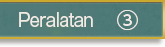
<style>
.page{position:relative;width:165px;height:47px}
.page>*{position:absolute;margin:0}
.t1{font:18px "GothicMB101Pro-Regular";letter-spacing:-0.04em;color:#f2ebe5;scale:0.9 1}
</style>
<div class="page">
<p class="t1" style="left:19px;top:12px;width:74px;height:15px">Peralatan</p>
</div>
